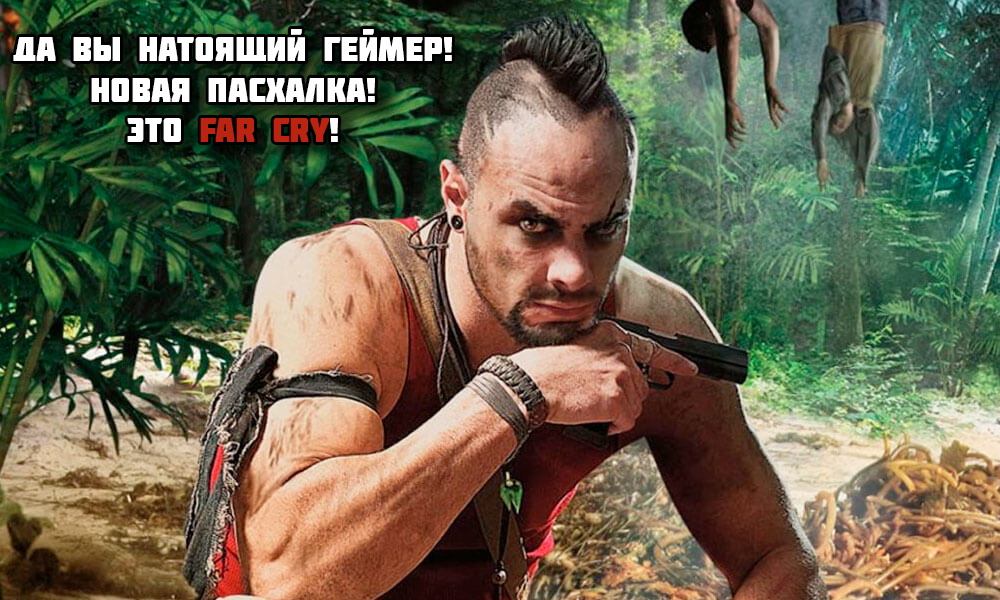
<style>
.page{position:relative;width:1000px;height:600px}
.page>*{position:absolute;margin:0}
.t1{font:33.9px "Molot";color:#fffefe}
.t2{font:33.9px "Molot";color:#bb2411}
</style>
<div class="page">
<p class="t1" style="left:13px;top:29px;width:439px;height:113px;text-align:center">да вы натоящий геймер!<br>новая пасхалка!<br>это <span class="t2">far cry</span>!</p>
</div>
